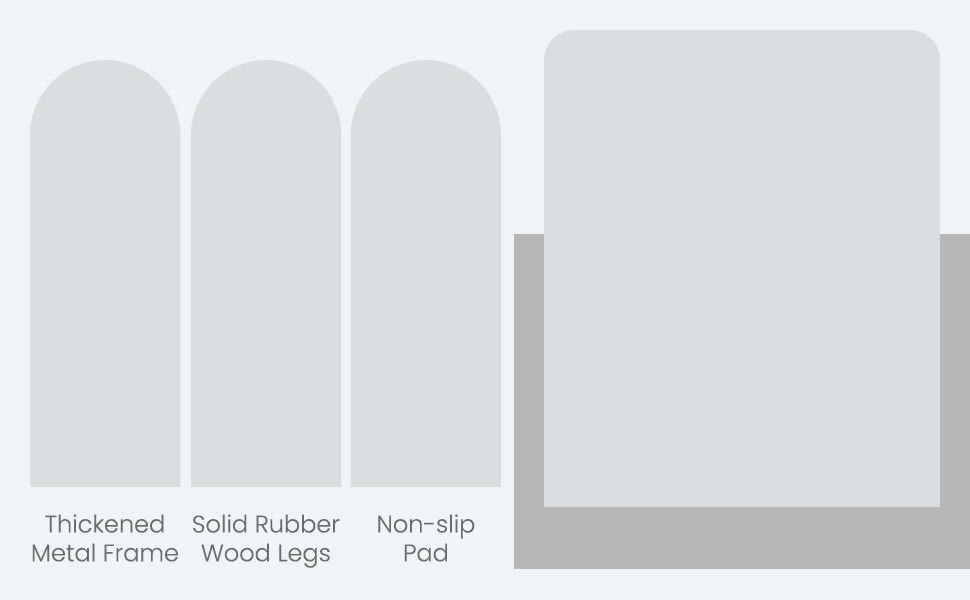
<style>
.page{position:relative;width:970px;height:600px;background:#dcdddf}
.page>*{position:absolute;margin:0}
.t1{font:24px "Poppins-Light";color:#6c6c6c}
</style>
<div class="page">
<p class="t1" style="left:32px;top:514px;width:146px;height:48px;text-align:center">Thickened<br>Metal Frame</p>
<p class="t1" style="left:193px;top:514px;width:147px;height:54px;text-align:center">Solid Rubber<br>Wood Legs</p>
<p class="t1" style="left:378px;top:514px;width:97px;height:48px;text-align:center">Non-slip<br>Pad</p>
</div>
